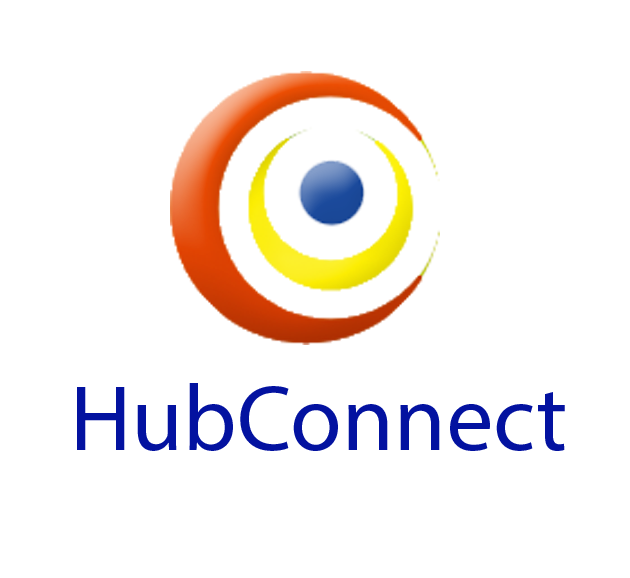
<style>
.page{position:relative;width:630px;height:578px;background:#ffffff}
.page>*{position:absolute;margin:0}
.t1{font:94px "MyriadPro-Regular";color:#0312a0}
</style>
<div class="page">
<p class="t1" style="left:77px;top:383px;width:488px;height:68px">HubConnect</p>
</div>
